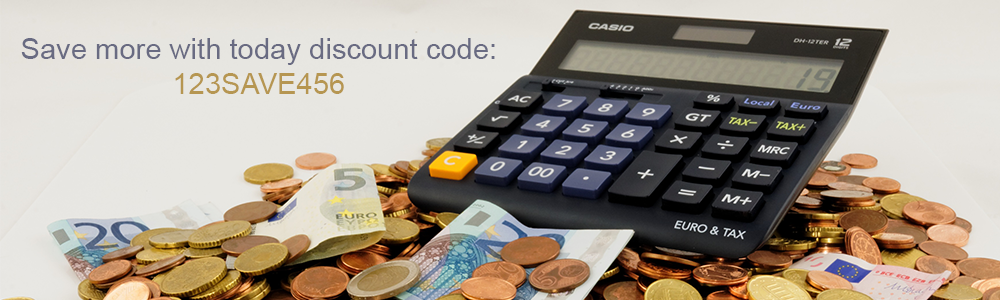
<style>
.page{position:relative;width:1000px;height:300px}
.page>*{position:absolute;margin:0}
.t1{font:29.2px "ArialMT";color:#696b82}
.t2{font:29.2px "ArialMT";color:#b69651}
</style>
<div class="page">
<p class="t1" style="left:21px;top:38px;width:474px;height:56px;text-align:center">Save more with today discount code:<br><span class="t2">123SAVE456</span></p>
</div>
